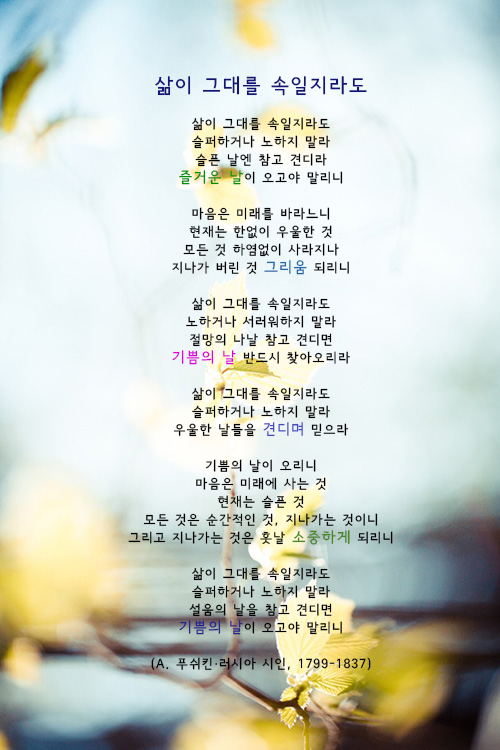
<style>
.page{position:relative;width:500px;height:750px}
.page>*{position:absolute;margin:0}
.t1{font:13px/18px "SeoulNamsanB";letter-spacing:0.1em;color:#000000}
.t2{font:20px/18px "SeoulNamsanB";letter-spacing:0.1em;color:#121478}
.t3{font:15px/18px "SeoulNamsanB";letter-spacing:0.1em;color:#009007}
.t4{font:15px/18px "SeoulNamsanB";letter-spacing:0.1em;color:#2269ab}
.t5{font:15px/18px "SeoulNamsanB";letter-spacing:0.1em;color:#dd00da}
.t6{font:15px/18px "SeoulNamsanB";letter-spacing:0.1em;color:#464bc1}
.t7{font:15px/18px "SeoulNamsanB";letter-spacing:0.1em;color:#498621}
.t8{font:15px/18px "SeoulNamsanB";letter-spacing:0.1em;color:#25258e}
</style>
<div class="page">
<p class="t1" style="left:128px;top:76px;width:265px;height:595px;text-align:center"><span class="t2">삶이 그대를 속일지라도<br></span><br>삶이 그대를 속일지라도<br>슬퍼하거나 노하지 말라<br>슬픈 날엔 참고 견디라<br><span class="t3">즐거운 날</span>이 오고야 말리니<br><br>마음은 미래를 바라느니<br>현재는 한없이 우울한 것<br>모든 것 하염없이 사라지나<br>지나가 버린 것 <span class="t4">그리움</span> 되리니<br><br>삶이 그대를 속일지라도<br>노하거나 서러워하지 말라<br>절망의 나날 참고 견디면<br><span class="t5">기쁨의 날</span> 반드시 찾아오리라<br><br>삶이 그대를 속일지라도<br>슬퍼하거나 노하지 말라<br>우울한 날들을 <span class="t6">견디며</span> 믿으라<br><br>기쁨의 날이 오리니<br>마음은 미래에 사는 것<br>현재는 슬픈 것<br>모든 것은 순간적인 것, 지나가는 것이니<br>그리고 지나가는 것은 훗날 <span class="t7">소중하게</span> 되리니<br><br>삶이 그대를 속일지라도<br>슬퍼하거나 노하지 말라<br>설움의 날을 참고 견디면<br><span class="t8">기쁨의 날</span>이 오고야 말리니<br><br>(A. 푸쉬킨·러시아 시인, 1799-1837)</p>
</div>
